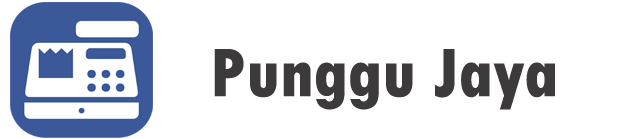
<style>
.page{position:relative;width:634px;height:139px;background:#ffffff}
.page>*{position:absolute;margin:0}
.t1{font:72px "TwCenMT-CondensedExtraBold";color:#3c3a3a}
</style>
<div class="page">
<p class="t1" style="left:214px;top:49px;width:341px;height:61px">Punggu Jaya</p>
</div>
